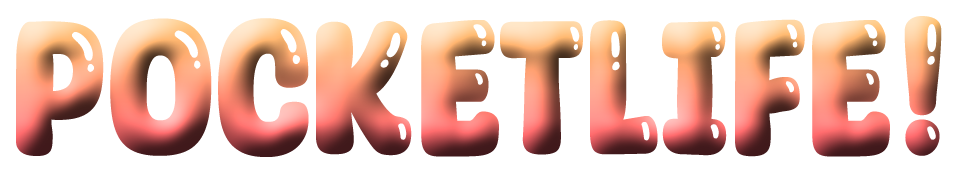
<style>
.page{position:relative;width:958px;height:172px;background:#ffffff}
.page>*{position:absolute;margin:0}
.t1{font:216px "GlossySheen-Shine"}
</style>
<div class="page">
<p class="t1" style="left:16px;top:16px;width:926px;height:141px">PocketLife!</p>
</div>
